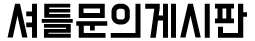
<style>
.page{position:relative;width:255px;height:41px;background:#ffffff}
.page>*{position:absolute;margin:0}
.t1{font:36px "BMDoHyeon";color:#000000}
</style>
<div class="page">
<p class="t1" style="left:7px;top:3px;width:240px;height:35px">셔틀문의게시판</p>
</div>
